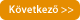
<style>
.page{position:relative;width:80px;height:20px;background:#e68d00}
.page>*{position:absolute;margin:0}
.t1{font:11px "MyriadPro-Semibold";color:#ffffff}
</style>
<div class="page">
<p class="t1" style="left:9px;top:5px;width:65px;height:8px">Következő &gt;&gt;</p>
</div>
